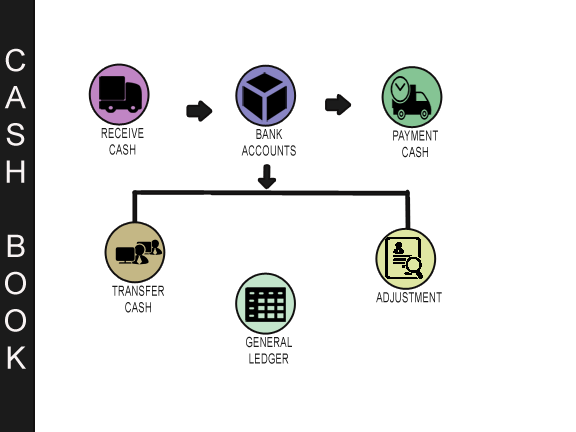
<style>
.page{position:relative;width:576px;height:432px;background:#ffffff}
.page>*{position:absolute;margin:0}
.t1{font:31px "ArialMT";letter-spacing:0.05em;color:#f8f3f3}
.t2{font:13.8px "ArialMT";letter-spacing:0.05em;color:#1b1b1b;scale:0.66 1}
</style>
<div class="page">
<p class="t1" style="left:4px;top:48px;width:22px;height:321px;text-align:center">CASH <br><br>BOOK</p>
<p class="t2" style="left:101px;top:127px;width:43px;height:28px;text-align:center">RECEIVE<br>CASH</p>
<p class="t2" style="left:241px;top:129px;width:55px;height:27px;text-align:center">BANK<br>ACCOUNTS</p>
<p class="t2" style="left:393px;top:130px;width:45px;height:28px;text-align:center">PAYMENT<br>CASH</p>
<p class="t2" style="left:112px;top:285px;width:52px;height:28px;text-align:center">TRANSFER<br>CASH</p>
<p class="t2" style="left:376px;top:292px;width:66px;height:11px">ADJUSTMENT</p>
<p class="t2" style="left:246px;top:336px;width:46px;height:28px;text-align:center">GENERAL<br>LEDGER</p>
</div>
